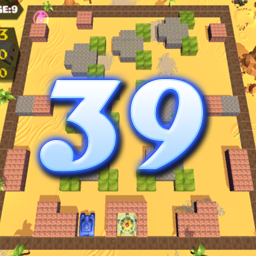
<style>
.page{position:relative;width:256px;height:256px}
.page>*{position:absolute;margin:0}
.t1{font:130px "Magneto-Bold";letter-spacing:0.02em}
</style>
<div class="page">
<p class="t1" style="left:40px;top:79px;width:163px;height:93px">39</p>
</div>
